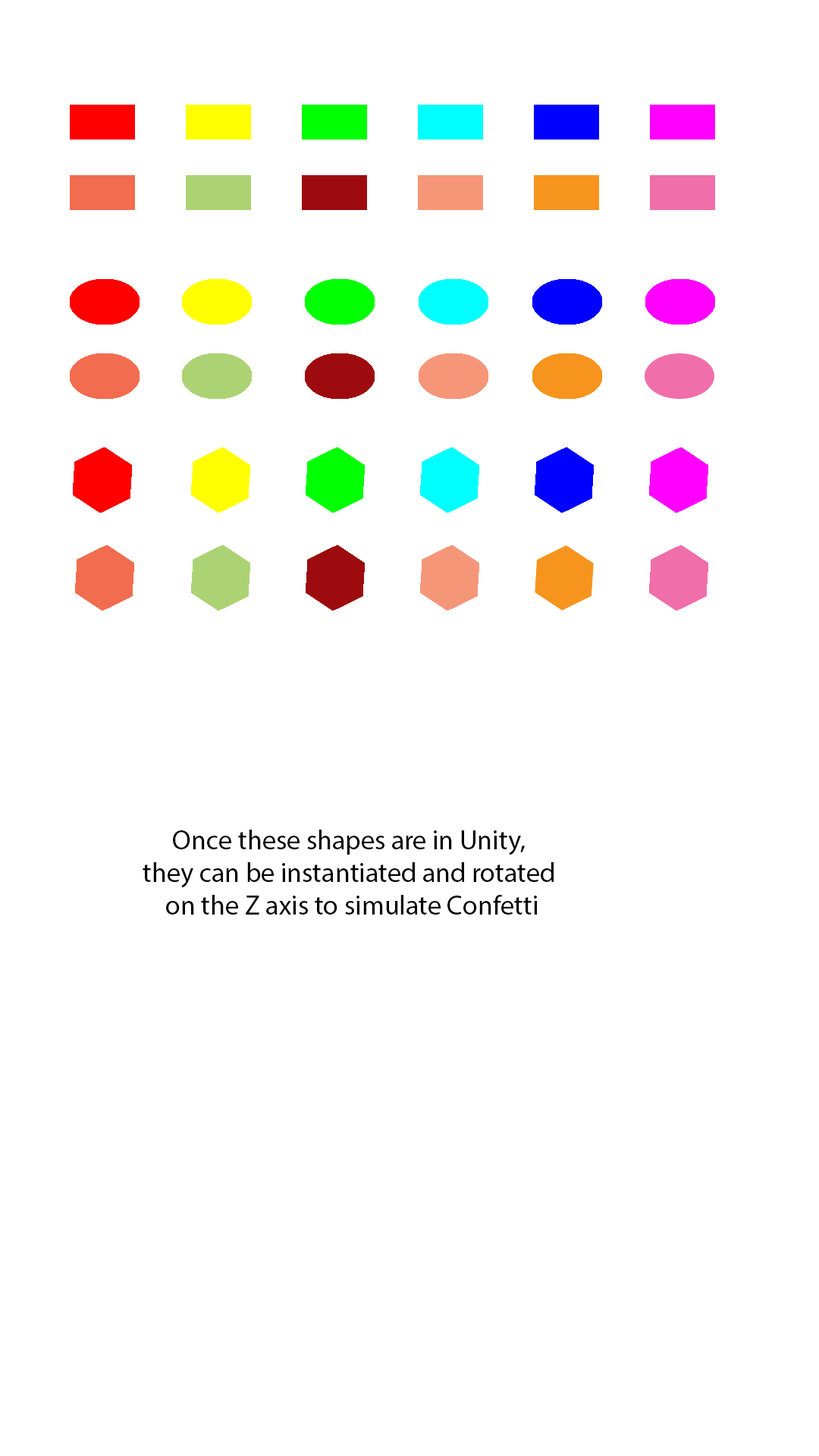
<style>
.page{position:relative;width:819px;height:1456px;background:#ffffff}
.page>*{position:absolute;margin:0}
.t1{font:27.3px "MyriadPro-Regular";color:#000000}
</style>
<div class="page">
<p class="t1" style="left:143px;top:830px;width:411px;height:85px;text-align:center">Once these shapes are in Unity, <br>they can be instantiated and rotated <br>on the Z axis to simulate Confetti</p>
</div>
